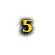
<style>
.page{position:relative;width:55px;height:55px;background:#ffffff}
.page>*{position:absolute;margin:0}
.t1{font:16px "Tahoma-Bold";color:#ffd400}
</style>
<div class="page">
<p class="t1" style="left:23px;top:20px;width:9px;height:12px">5</p>
</div>
